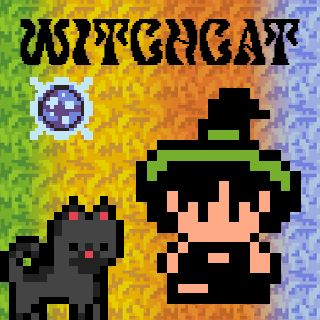
<style>
.page{position:relative;width:320px;height:320px;background:#000000}
.page>*{position:absolute;margin:0}
.t1{font:61px "PixeloutPersonalUseOnly-Reg";color:#000000;scale:0.88 1}
</style>
<div class="page">
<p class="t1" style="left:20px;top:19px;width:280px;height:46px">WITCHCAT</p>
</div>
